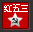
<style>
.page{position:relative;width:33px;height:32px;background:#c50000}
.page>*{position:absolute;margin:0}
.t1{font:10.4px "SimSun";letter-spacing:-0.25em;color:#ffffff}
</style>
<div class="page">
<p class="t1" style="left:4px;top:4px;width:24px;height:8px">红五三</p>
</div>
